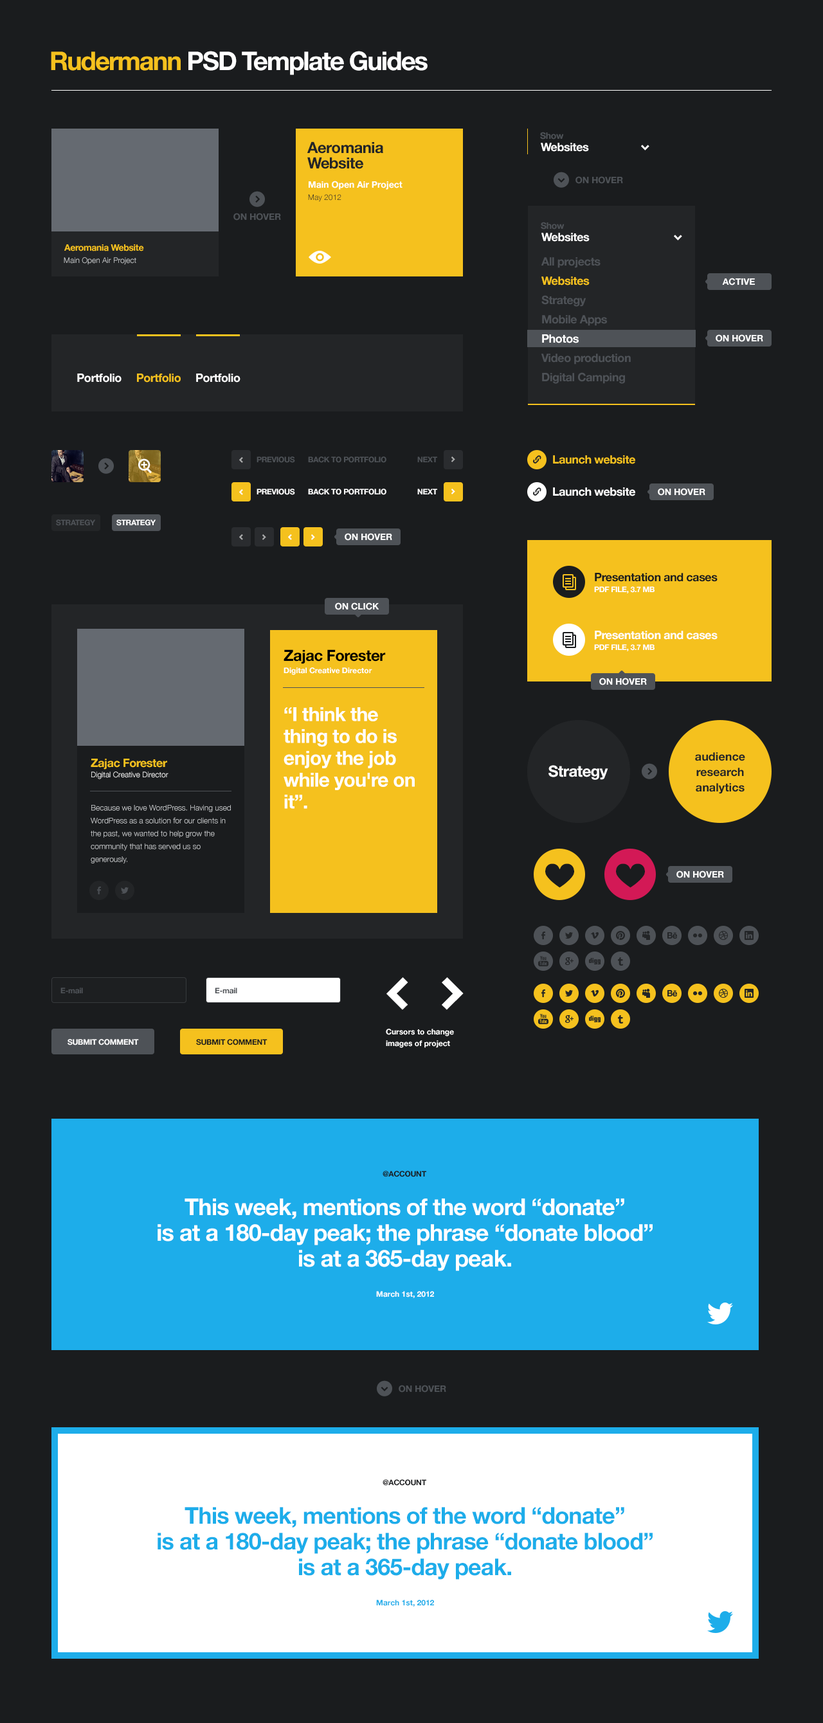
<style>
.page{position:relative;width:823px;height:1723px;background:#1a1c1e}
.page>*{position:absolute;margin:0}
.t1{font:25.7px "HelveticaNeue-Bold";letter-spacing:-0.05em;color:#ffffff}
.t2{font:25.7px "HelveticaNeue-Bold";letter-spacing:-0.05em;color:#f5c11e}
.t3{font:9px "HelveticaNeue-Bold";letter-spacing:-0.025em;color:#4e5257}
.t4{font:15.4px/15.4px "HelveticaNeue-Bold";letter-spacing:-0.025em;color:#232527}
.t5{font:11.6px "HelveticaNeue-Bold";letter-spacing:-0.025em;color:#ffffff}
.t6{font:15.4px "WebSymbols-Regular";color:#4e5257}
.t7{font:9px "HelveticaNeue-Bold";color:#ffffff}
.t8{font:9px "HelveticaNeue-Bold";color:#4e5257;text-transform:uppercase}
.t9{font:7.7px "HelveticaNeue-Light";color:#232527}
.t10{font:9px "HelveticaNeue-Bold";letter-spacing:-0.025em;color:#f5c11e}
.t11{font:7.7px "HelveticaNeue-Light";color:#ccced0}
.t12{font:11.6px/19.3px "HelveticaNeue-Bold";letter-spacing:-0.025em;color:#4e5257}
.t13{font:11.6px/19.3px "HelveticaNeue-Bold";letter-spacing:-0.025em;color:#f5c11e}
.t14{font:11.6px/19.3px "HelveticaNeue-Bold";letter-spacing:-0.025em;color:#ffffff}
.t15{font:9px "HelveticaNeue-Bold";color:#ffffff;text-transform:uppercase}
.t16{font:11.6px "HelveticaNeue-Bold";letter-spacing:-0.025em;color:#f5c11e}
.t17{font:7.7px "HelveticaNeue-Bold";letter-spacing:-0.025em;color:#4e5257;text-transform:uppercase}
.t18{font:7.7px "HelveticaNeue-Bold";letter-spacing:-0.025em;color:#ffffff;text-transform:uppercase}
.t19{font:11.6px "HelveticaNeue-Bold";letter-spacing:-0.025em;color:#fefefe}
.t20{font:7.7px "HelveticaNeue-Bold";letter-spacing:-0.025em;color:#4e5257}
.t21{font:7.7px "HelveticaNeue-Bold";letter-spacing:-0.025em;color:#ffffff}
.t22{font:11.6px "HelveticaNeue-Bold";letter-spacing:-0.025em;color:#1a1c1e}
.t23{font:15.4px "HelveticaNeue-Bold";letter-spacing:-0.025em;color:#000000}
.t24{font:7.7px "HelveticaNeue-Bold";color:#ffffff}
.t25{font:19.3px/21.9px "HelveticaNeue-Bold";letter-spacing:-0.025em;color:#ffffff}
.t26{font:11.6px/15.4px "HelveticaNeue-Bold";color:#232527}
.t27{font:7.7px "HelveticaNeue-Light";color:#ffffff}
.t28{font:15.4px "HelveticaNeue-Bold";letter-spacing:-0.025em;color:#ffffff}
.t29{font:7.7px/12.9px "HelveticaNeue-Light";color:#ccced0}
.t30{font:7.7px/11.6px "HelveticaNeue-Bold";color:#ffffff}
.t31{font:7.7px "HelveticaNeue-Bold";letter-spacing:-0.025em;color:#1a1c1e;text-transform:uppercase}
.t32{font:23.1px/25.7px "HelveticaNeue-Bold";letter-spacing:-0.025em;color:#ffffff}
.t33{font:23.1px/25.7px "HelveticaNeue-Bold";letter-spacing:-0.025em;color:#1dadea}
.t34{font:7.7px "HelveticaNeue-Bold";color:#1dadea}
</style>
<div class="page">
<p class="t1" style="left:51px;top:51px;width:377px;height:24px"><span class="t2">Rudermann</span> PSD Template Guides</p>
<p class="t3" style="left:540px;top:132px;width:24px;height:8px">Show</p>
<p class="t4" style="left:307px;top:141px;width:76px;height:28px">Aeromania<br>Website</p>
<p class="t5" style="left:541px;top:143px;width:48px;height:9px">Websites</p>
<p class="t6" style="left:554px;top:172px;width:15px;height:16px">;</p>
<p class="t7" style="left:309px;top:181px;width:93px;height:9px">Main Open Air Project</p>
<p class="t8" style="left:575px;top:176px;width:48px;height:8px">On hover</p>
<p class="t6" style="left:249px;top:191px;width:16px;height:16px">)</p>
<p class="t9" style="left:308px;top:194px;width:33px;height:8px">May 2012</p>
<p class="t8" style="left:233px;top:213px;width:48px;height:8px">On hover</p>
<p class="t3" style="left:541px;top:222px;width:23px;height:8px">Show</p>
<p class="t5" style="left:541px;top:233px;width:49px;height:9px">Websites</p>
<p class="t10" style="left:64px;top:244px;width:80px;height:7px">Aeromania Website</p>
<p class="t11" style="left:64px;top:257px;width:72px;height:8px">Main Open Air Project</p>
<p class="t12" style="left:541px;top:257px;width:90px;height:127px">All projects<br><span class="t13">Websites<br></span>Strategy<br>Mobile Apps<br><span class="t14">Photos<br></span>Video production<br>Digital Camping</p>
<p class="t15" style="left:722px;top:278px;width:33px;height:7px">Active</p>
<p class="t15" style="left:716px;top:334px;width:47px;height:8px">On hover</p>
<p class="t5" style="left:77px;top:374px;width:163px;height:8px">Portfolio     <span class="t16">Portfolio     </span>Portfolio</p>
<p class="t6" style="left:98px;top:458px;width:16px;height:16px">)</p>
<p class="t17" style="left:256px;top:456px;width:39px;height:7px">previous</p>
<p class="t17" style="left:308px;top:456px;width:78px;height:7px">Back to portfolio</p>
<p class="t17" style="left:417px;top:456px;width:20px;height:6px">NEXT</p>
<p class="t16" style="left:553px;top:455px;width:82px;height:9px">Launch website</p>
<p class="t18" style="left:256px;top:489px;width:39px;height:6px">previous</p>
<p class="t18" style="left:308px;top:489px;width:78px;height:6px">Back to portfolio</p>
<p class="t18" style="left:417px;top:489px;width:20px;height:5px">NEXT</p>
<p class="t19" style="left:553px;top:487px;width:82px;height:9px">Launch website</p>
<p class="t15" style="left:658px;top:488px;width:47px;height:8px">On hover</p>
<p class="t20" style="left:56px;top:519px;width:40px;height:7px">STRATEGY</p>
<p class="t21" style="left:116px;top:519px;width:40px;height:7px">STRATEGY</p>
<p class="t15" style="left:345px;top:533px;width:47px;height:8px">On hover</p>
<p class="t22" style="left:595px;top:573px;width:122px;height:9px">Presentation and cases</p>
<p class="t18" style="left:594px;top:586px;width:60px;height:7px">PDF file, 3.7 Mb</p>
<p class="t15" style="left:335px;top:602px;width:44px;height:8px">On CLick</p>
<p class="t5" style="left:595px;top:631px;width:122px;height:9px">Presentation and cases</p>
<p class="t23" style="left:284px;top:649px;width:102px;height:15px">Zajac Forester</p>
<p class="t18" style="left:594px;top:644px;width:60px;height:7px">PDF file, 3.7 Mb</p>
<p class="t24" style="left:284px;top:667px;width:88px;height:8px">Digital Creative Director</p>
<p class="t15" style="left:599px;top:678px;width:48px;height:7px">On Hover</p>
<p class="t25" style="left:284px;top:707px;width:131px;height:102px">“I think the thing to do is enjoy the job while you're on it”.</p>
<p class="t16" style="left:91px;top:759px;width:76px;height:11px">Zajac Forester</p>
<p class="t26" style="left:695px;top:752px;width:50px;height:42px;text-align:center">audience<br>research<br>analytics</p>
<p class="t27" style="left:91px;top:771px;width:77px;height:8px">Digital Creative Director</p>
<p class="t28" style="left:548px;top:765px;width:60px;height:15px">Strategy</p>
<p class="t6" style="left:642px;top:763px;width:15px;height:16px">)</p>
<p class="t29" style="left:91px;top:805px;width:140px;height:58px">Because we love WordPress. Having used<br>WordPress as a solution for our clients in the past, we wanted to help grow the community that has served us so<br>generously.</p>
<p class="t15" style="left:676px;top:870px;width:48px;height:8px">On hover</p>
<p class="t20" style="left:60px;top:987px;width:23px;height:7px">E-mail</p>
<p class="t20" style="left:215px;top:987px;width:22px;height:7px">E-mail</p>
<p class="t30" style="left:386px;top:1029px;width:68px;height:19px">Cursors to change<br>images of project</p>
<p class="t18" style="left:68px;top:1039px;width:71px;height:6px">Submit comment</p>
<p class="t31" style="left:196px;top:1039px;width:71px;height:6px">Submit comment</p>
<p class="t31" style="left:382px;top:1171px;width:44px;height:6px">@account</p>
<p class="t32" style="left:158px;top:1198px;width:494px;height:73px;text-align:center">This week, mentions of the word “donate”<br>is at a 180-day peak; the phrase “donate blood”<br>is at a 365-day peak.</p>
<p class="t24" style="left:376px;top:1291px;width:58px;height:7px">March 1st, 2012</p>
<p class="t6" style="left:377px;top:1380px;width:15px;height:16px">;</p>
<p class="t8" style="left:399px;top:1385px;width:47px;height:7px">On hover</p>
<p class="t31" style="left:382px;top:1479px;width:44px;height:7px">@account</p>
<p class="t33" style="left:158px;top:1507px;width:494px;height:73px;text-align:center">This week, mentions of the word “donate”<br>is at a 180-day peak; the phrase “donate blood”<br>is at a 365-day peak.</p>
<p class="t34" style="left:376px;top:1599px;width:58px;height:8px">March 1st, 2012</p>
</div>
